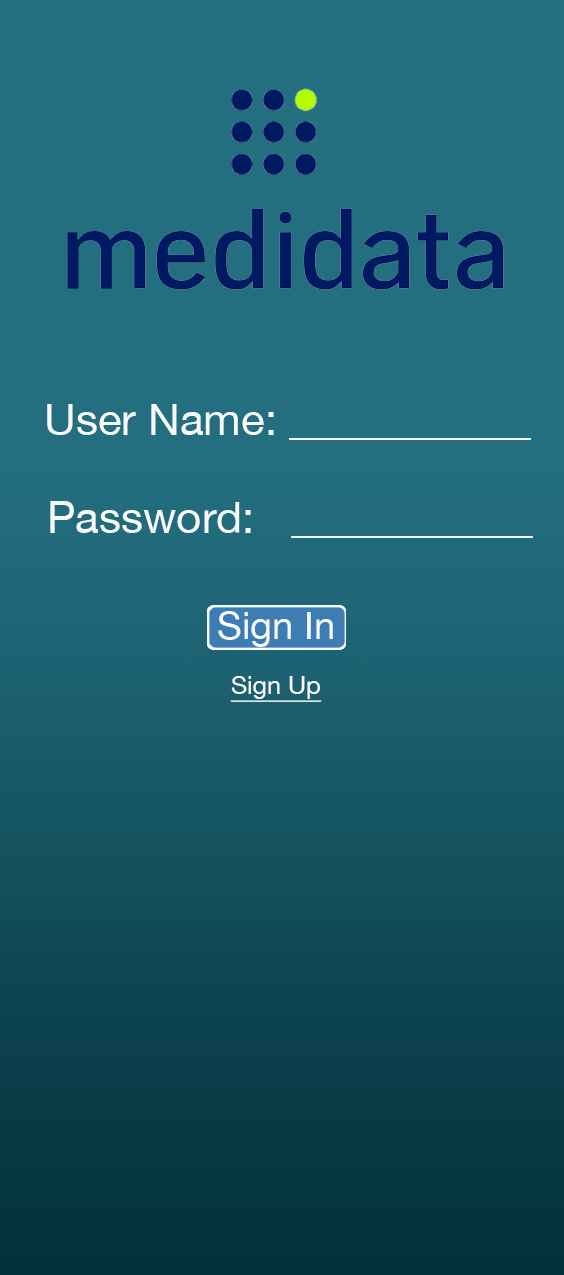
<style>
.page{position:relative;width:564px;height:1275px;background:#236e7f}
.page>*{position:absolute;margin:0}
.t1{font:44px "HelveticaNeue";color:#f7fafb}
.t2{font:38px "HelveticaNeue";color:#f7fafb}
.t3{font:25px "HelveticaNeue";color:#f7fafb;text-decoration:underline}
</style>
<div class="page">
<p class="t1" style="left:47px;top:404px;width:484px;height:36px">User Name: ___________</p>
<p class="t1" style="left:50px;top:501px;width:483px;height:37px">Password:   ___________</p>
<p class="t2" style="left:218px;top:611px;width:115px;height:91px;text-align:center">Sign In<br><span class="t3">Sign Up</span></p>
</div>
